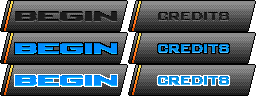
<style>
.page{position:relative;width:256px;height:96px}
.page>*{position:absolute;margin:0}
.t1{font:16px "PlainOMatic";color:#2d2d2d}
.t2{font:16px "PlainOMatic";letter-spacing:0.1em;color:#2d2d2d;scale:0.45 1}
</style>
<div class="page">
<p class="t1" style="left:15px;top:11px;width:102px;height:11px">BEGIN</p>
<p class="t2" style="left:158px;top:12px;width:71px;height:9px">CREDITS</p>
</div>
